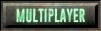
<style>
.page{position:relative;width:101px;height:31px}
.page>*{position:absolute;margin:0}
.t1{font:19px "Sunzoomspark";color:#ccf6d8}
</style>
<div class="page">
<p class="t1" style="left:16px;top:8px;width:69px;height:16px">Multiplayer</p>
</div>
